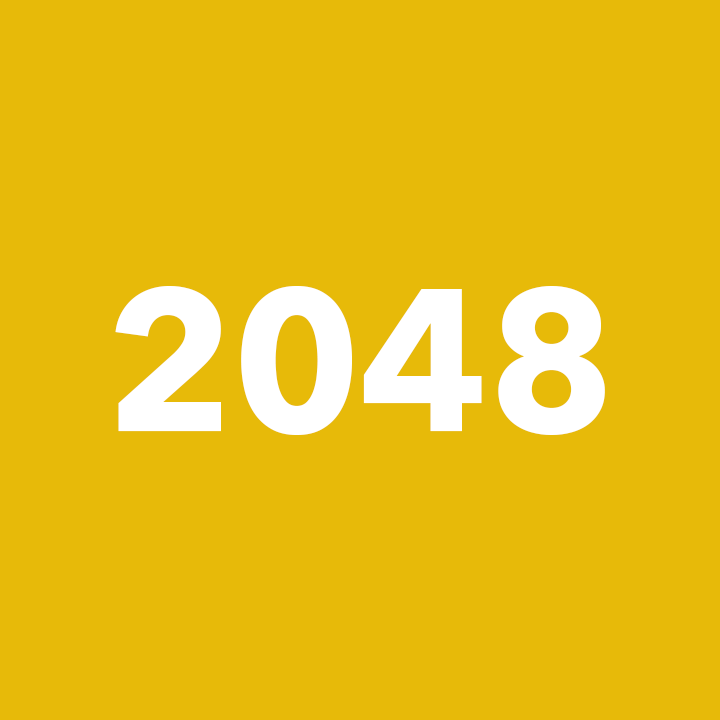
<style>
.page{position:relative;width:720px;height:720px;background:#e7ba09}
.page>*{position:absolute;margin:0}
.t1{font:200px "AvenirNext-Bold";letter-spacing:-0.01em;color:#ffffff;text-transform:uppercase}
</style>
<div class="page">
<p class="t1" style="left:115px;top:286px;width:490px;height:149px">2048</p>
</div>
